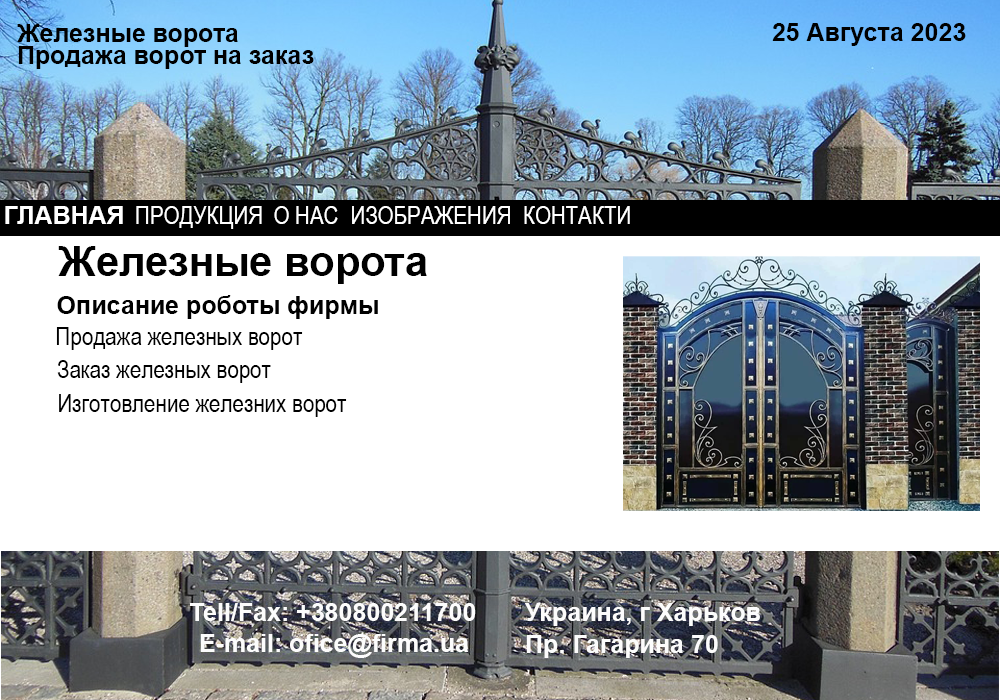
<style>
.page{position:relative;width:1000px;height:700px;background:#ffffff}
.page>*{position:absolute;margin:0}
.t1{font:25px "Arial-BoldMT";color:#000000}
.t2{font:25px "Arial-BoldMT";color:#ffffff}
.t3{font:25px "ArialNarrow";color:#ffffff}
.t4{font:41.7px "Arial-BoldMT";color:#000000}
.t5{font:25px "ArialNarrow";color:#000000}
.t6{font:25px "Arial-BoldMT";color:#fcfcfc}
</style>
<div class="page">
<p class="t1" style="left:17px;top:24px;width:221px;height:23px">Железные ворота</p>
<p class="t1" style="left:772px;top:23px;width:194px;height:23px">25 Августа 2023</p>
<p class="t1" style="left:18px;top:46px;width:296px;height:23px">Продажа ворот на заказ</p>
<p class="t2" style="left:5px;top:206px;width:118px;height:18px">ГЛАВНАЯ</p>
<p class="t3" style="left:136px;top:206px;width:126px;height:23px">ПРОДУКЦИЯ</p>
<p class="t3" style="left:274px;top:206px;width:64px;height:18px">О НАС</p>
<p class="t3" style="left:352px;top:206px;width:158px;height:18px">ИЗОБРАЖЕНИЯ</p>
<p class="t3" style="left:524px;top:206px;width:106px;height:18px">КОНТАКТИ</p>
<p class="t4" style="left:58px;top:246px;width:369px;height:38px">Железные ворота</p>
<p class="t1" style="left:57px;top:295px;width:321px;height:24px">Описание роботы фирмы</p>
<p class="t5" style="left:56px;top:327px;width:247px;height:23px">Продажа железных ворот</p>
<p class="t5" style="left:57px;top:360px;width:214px;height:23px">Заказ железных ворот</p>
<p class="t5" style="left:59px;top:394px;width:288px;height:23px">Изготовление железних ворот</p>
<p class="t6" style="left:190px;top:603px;width:286px;height:18px">Tell/Fax: +380800211700</p>
<p class="t6" style="left:525px;top:603px;width:235px;height:23px">Украина, г Харьков</p>
<p class="t6" style="left:200px;top:634px;width:269px;height:24px">E-mail: ofice@firma.ua</p>
<p class="t6" style="left:526px;top:635px;width:192px;height:23px">Пр. Гагарина 70</p>
</div>
